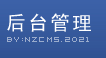
<style>
.page{position:relative;width:106px;height:58px}
.page>*{position:absolute;margin:0}
.t1{font:20px "SimHei";letter-spacing:0.1em;color:#ffffff}
.t2{font:8px "04b08";letter-spacing:0.16em;color:#9aabcc}
</style>
<div class="page">
<p class="t1" style="left:7px;top:13px;width:84px;height:19px">后台管理</p>
<p class="t2" style="left:7px;top:37px;width:82px;height:5px">by:nzcms.2021</p>
</div>
